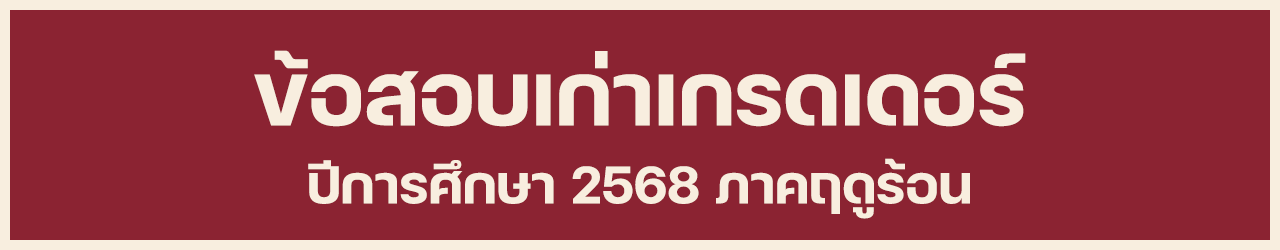
<style>
.page{position:relative;width:1280px;height:250px;background:#8b2332}
.page>*{position:absolute;margin:0}
.t1{font:120px "FCMinimalBold";color:#f8eedf}
.t2{font:72px "FCMinimalBold";color:#f8eedf}
</style>
<div class="page">
<p class="t1" style="left:254px;top:50px;width:772px;height:77px">ข้อสอบเก่าเกรดเดอร์</p>
<p class="t2" style="left:308px;top:158px;width:662px;height:61px">ปีการศึกษา 2568 ภาคฤดูร้อน</p>
</div>
